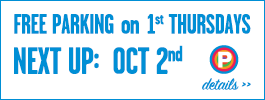
<style>
.page{position:relative;width:265px;height:100px;background:#ffffff}
.page>*{position:absolute;margin:0}
.t1{font:28px "GarageGothicBold";letter-spacing:-0.02em;color:#008fd5;text-transform:uppercase}
.t2{font:28px "GarageGothicBold";letter-spacing:-0.02em;color:#008fd5}
.t3{font:38px "GarageGothicBold";letter-spacing:-0.02em;color:#008fd5;text-transform:uppercase}
.t4{font:40px "GarageGothicBold";letter-spacing:-0.02em;color:#008fd5;text-transform:uppercase}
.t5{font:38px "GarageGothicBold";letter-spacing:-0.02em;color:#008fd5}
.t6{font:18px "SignPainter-HouseScript";letter-spacing:-0.02em;color:#008fd5}
</style>
<div class="page">
<p class="t1" style="left:14px;top:14px;width:237px;height:20px">FRee Parking <span class="t2">on </span>1<span class="t2">st </span>Thursdays</p>
<p class="t3" style="left:14px;top:45px;width:169px;height:29px">Next up<span class="t4">:  </span>OCT 2<span class="t5">nd</span></p>
<p class="t6" style="left:202px;top:78px;width:49px;height:12px">details &gt;&gt;</p>
</div>
